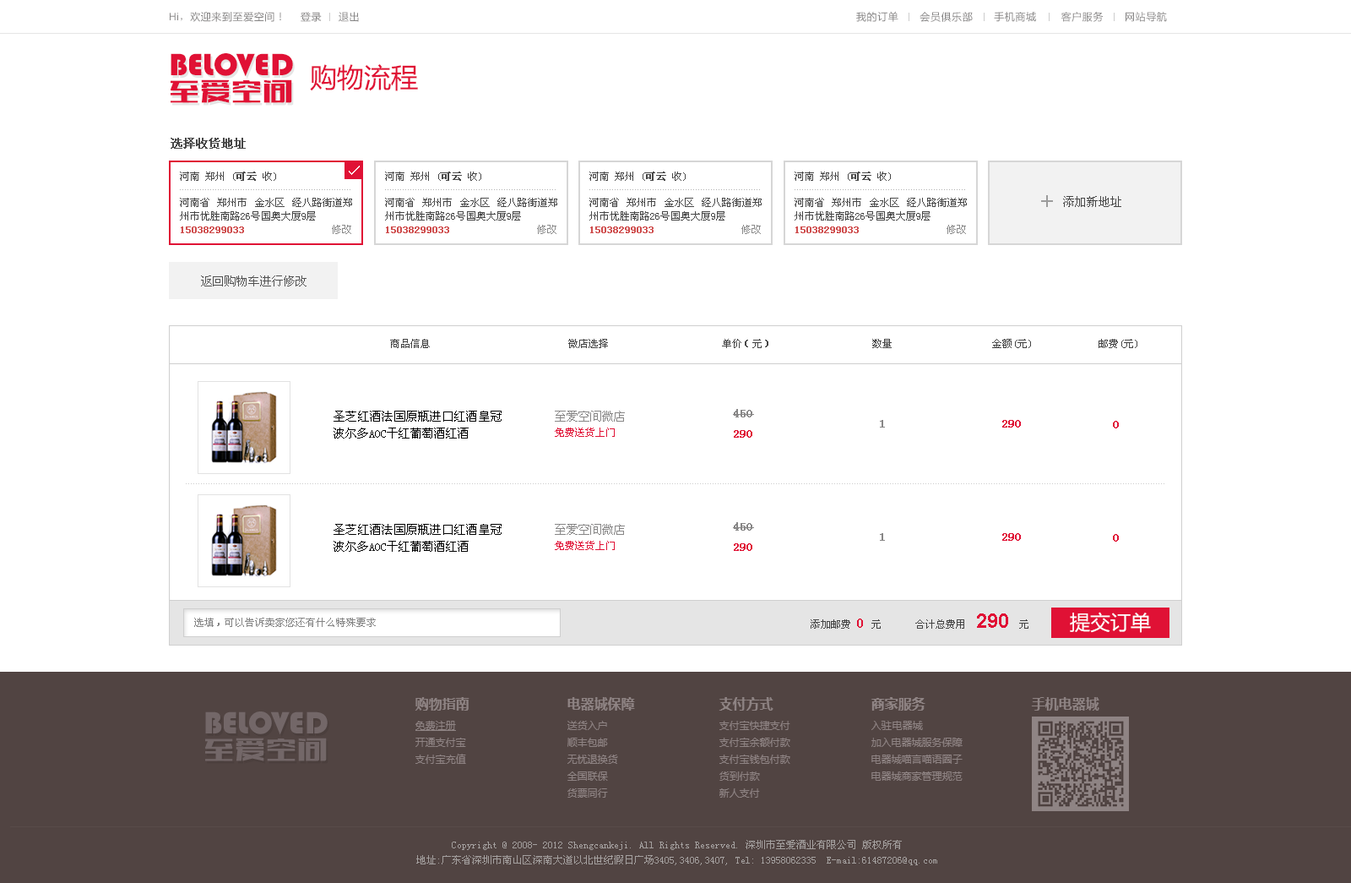
<style>
.page{position:relative;width:1351px;height:883px;background:#ffffff}
.page>*{position:absolute;margin:0}
.t1{font:10.1px "MicrosoftYaHei";letter-spacing:0.05em;color:#858484}
.t2{font:10.1px "ArialMT";letter-spacing:0.05em;color:#858484}
.t3{font:10.1px "SimSun";letter-spacing:0.05em;color:#858484}
.t4{font:32.1px "Bauhaus93";color:#e01135}
.t5{font:27px "MicrosoftYaHei";color:#e01135}
.t6{font:30.4px "FZCTHJW--GB1-0";letter-spacing:0.025em;color:#e01135}
.t7{font:11.8px "SimSun";color:#474747;font-weight:bold}
.t8{font:10.1px "SimSun";color:#474747}
.t9{font:10.1px "SimSun";color:#474747;font-weight:bold}
.t10{font:10.1px/13.5px "SimSun";color:#474747}
.t11{font:10.1px/13.5px "SimSun";color:#cf4e4e;font-weight:bold}
.t12{font:11.8px "SimSun";color:#474747}
.t13{font:10.1px "SimSun";color:#8a8a8a}
.t14{font:11.8px "SimSun";color:#515050}
.t15{font:10.1px "SimSun";color:#444444}
.t16{font:11.8px/16.9px "SimSun";color:#000000}
.t17{font:11.8px/16.9px "SimSun";color:#878686}
.t18{font:10.1px/16.9px "SimSun";color:#e01135}
.t19{font:11.8px/20.3px "SimSun";color:#878686;font-weight:bold}
.t20{font:11.8px/20.3px "SimSun";color:#e01135;font-weight:bold}
.t21{font:11.8px "SimSun";color:#878686;font-weight:bold}
.t22{font:11.8px "SimSun";color:#e01135;font-weight:bold}
.t23{font:10.1px "SimSun";color:#868686}
.t24{font:20.3px "Arial-BoldMT";color:#e01135}
.t25{font:20.3px "MicrosoftYaHei";color:#ffffff}
.t26{font:13.5px "SimSun";color:#e01135;font-weight:bold}
.t27{font:10.1px/15.2px "SimSun";color:#a4a09f}
</style>
<div class="page">
<p class="t1" style="left:170px;top:12px;width:111px;height:10px"><span class="t2">Hi</span><span class="t3">，</span>欢迎来到至爱空间！</p>
<p class="t1" style="left:301px;top:12px;width:21px;height:10px">登录</p>
<p class="t1" style="left:339px;top:12px;width:20px;height:10px">退出</p>
<p class="t1" style="left:856px;top:11px;width:311px;height:11px">我的订单      会员俱乐部      手机商城       客户服务      网站导航</p>
<p class="t4" style="left:171px;top:53px;width:122px;height:24px">BELOVED</p>
<p class="t5" style="left:310px;top:64px;width:108px;height:27px">购物流程</p>
<p class="t6" style="left:171px;top:79px;width:121px;height:24px">至爱空间</p>
<p class="t7" style="left:171px;top:138px;width:75px;height:11px">选择收货地址</p>
<p class="t8" style="left:180px;top:171px;width:96px;height:10px">河南 郑州 (<span class="t9">可云</span> 收)</p>
<p class="t8" style="left:385px;top:171px;width:96px;height:10px">河南 郑州 (<span class="t9">可云</span> 收)</p>
<p class="t8" style="left:589px;top:171px;width:97px;height:10px">河南 郑州 (<span class="t9">可云</span> 收)</p>
<p class="t8" style="left:795px;top:171px;width:96px;height:10px">河南 郑州 (<span class="t9">可云</span> 收)</p>
<p class="t10" style="left:180px;top:198px;width:172px;height:35px;text-align:justify">河南省 郑州市 金水区 经八路街道郑州市优胜南路26号国奥大厦9层<br><span class="t11">15038299033</span></p>
<p class="t10" style="left:385px;top:198px;width:172px;height:35px;text-align:justify">河南省 郑州市 金水区 经八路街道郑州市优胜南路26号国奥大厦9层<br><span class="t11">15038299033</span></p>
<p class="t10" style="left:589px;top:198px;width:173px;height:35px;text-align:justify">河南省 郑州市 金水区 经八路街道郑州市优胜南路26号国奥大厦9层<br><span class="t11">15038299033</span></p>
<p class="t10" style="left:795px;top:198px;width:172px;height:35px;text-align:justify">河南省 郑州市 金水区 经八路街道郑州市优胜南路26号国奥大厦9层<br><span class="t11">15038299033</span></p>
<p class="t12" style="left:1063px;top:196px;width:58px;height:11px">添加新地址</p>
<p class="t13" style="left:332px;top:225px;width:19px;height:9px">修改</p>
<p class="t13" style="left:537px;top:225px;width:20px;height:9px">修改</p>
<p class="t13" style="left:741px;top:225px;width:20px;height:9px">修改</p>
<p class="t13" style="left:947px;top:225px;width:19px;height:9px">修改</p>
<p class="t14" style="left:201px;top:275px;width:106px;height:11px">返回购物车进行修改</p>
<p class="t15" style="left:390px;top:339px;width:40px;height:9px">商品信息</p>
<p class="t15" style="left:568px;top:339px;width:40px;height:9px">微店选择</p>
<p class="t15" style="left:722px;top:339px;width:46px;height:9px">单价（元）</p>
<p class="t15" style="left:872px;top:339px;width:20px;height:9px">数量</p>
<p class="t15" style="left:992px;top:339px;width:39px;height:9px">金额(元)</p>
<p class="t15" style="left:1099px;top:339px;width:39px;height:9px">邮费(元)</p>
<p class="t16" style="left:334px;top:410px;width:168px;height:28px;text-align:justify">圣芝红酒法国原瓶进口红酒皇冠波尔多AOC干红葡萄酒红酒</p>
<p class="t17" style="left:555px;top:410px;width:70px;height:27px;text-align:justify">至爱空间微店<br><span class="t18">免费送货上门</span></p>
<p class="t19" style="left:733px;top:409px;width:21px;height:28px;text-align:justify">450<br><span class="t20">290</span></p>
<p class="t21" style="left:880px;top:420px;width:5px;height:7px">1</p>
<p class="t22" style="left:1002px;top:420px;width:19px;height:7px">290</p>
<p class="t22" style="left:1113px;top:421px;width:6px;height:7px">0</p>
<p class="t19" style="left:733px;top:522px;width:21px;height:29px;text-align:justify">450<br><span class="t20">290</span></p>
<p class="t16" style="left:334px;top:524px;width:168px;height:27px;text-align:justify">圣芝红酒法国原瓶进口红酒皇冠波尔多AOC干红葡萄酒红酒</p>
<p class="t17" style="left:555px;top:524px;width:70px;height:26px;text-align:justify">至爱空间微店<br><span class="t18">免费送货上门</span></p>
<p class="t21" style="left:880px;top:533px;width:5px;height:7px">1</p>
<p class="t22" style="left:1002px;top:533px;width:19px;height:7px">290</p>
<p class="t22" style="left:1113px;top:534px;width:6px;height:7px">0</p>
<p class="t23" style="left:194px;top:617px;width:182px;height:10px">选填，可以告诉卖家您还有什么特殊要求</p>
<p class="t15" style="left:915px;top:613px;width:114px;height:15px">合计总费用  <span class="t24">290</span>  元</p>
<p class="t25" style="left:1070px;top:611px;width:81px;height:22px">提交订单</p>
<p class="t15" style="left:811px;top:618px;width:70px;height:10px">添加邮费 <span class="t26">0 </span>元</p>
<p class="t27" style="left:416px;top:839px;width:521px;height:26px;text-align:center">Copyright @ 2008- 2012 Shengcankeji. All Rights Reserved. 深圳市至爱酒业有限公司 版权所有<br>地址:广东省深圳市南山区深南大道以北世纪假日广场3405,3406,3407, Tel: 13958062335  E-mail:61487206@qq.com</p>
</div>
